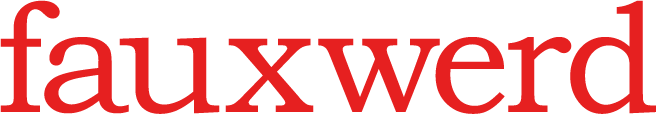
<style>
.page{position:relative;width:656px;height:114px;background:#ffffff}
.page>*{position:absolute;margin:0}
.t1{font:155.1px "BookmanOldStyle";letter-spacing:-0.025em;color:#e62020}
</style>
<div class="page">
<p class="t1" style="left:0px;top:0px;width:656px;height:114px">fauxwerd</p>
</div>
